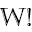
<style>
.page{position:relative;width:32px;height:32px;background:#ffffff}
.page>*{position:absolute;margin:0}
.t1{font:25px "Castellar";color:#000000}
</style>
<div class="page">
<p class="t1" style="left:0px;top:8px;width:31px;height:18px">W!</p>
</div>
